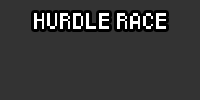
<style>
.page{position:relative;width:200px;height:100px;background:#333333}
.page>*{position:absolute;margin:0}
.t1{font:13.3px "Pixeled";color:#ffffff}
</style>
<div class="page">
<p class="t1" style="left:34px;top:13px;width:132px;height:16px">HURDLE RACE</p>
</div>
